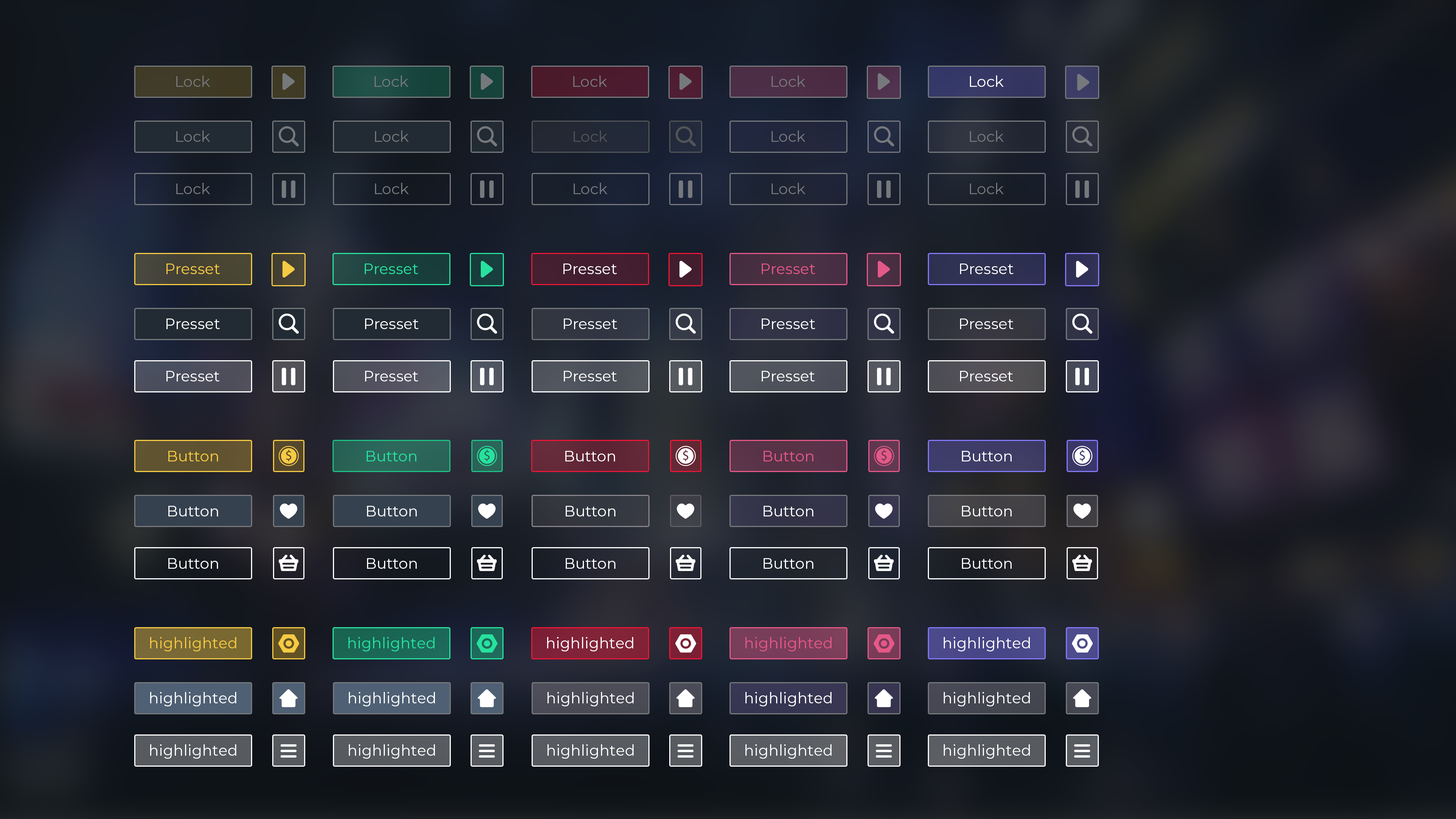
<style>
.page{position:relative;width:1456px;height:819px}
.page>*{position:absolute;margin:0}
.t1{font:15.2px "Montserrat-Regular";color:#76797c}
.t2{font:15.2px "Montserrat-Regular";color:#ffffff}
.t3{font:15.2px "Montserrat-Regular";color:#525557}
.t4{font:15.2px "Montserrat-Regular";color:#f6ca43}
.t5{font:15.2px "Montserrat-Regular";color:#27e29e}
.t6{font:15.2px "Montserrat-Regular";color:#e45887}
</style>
<div class="page">
<p class="t1" style="left:176px;top:75px;width:34px;height:12px">Lock</p>
<p class="t1" style="left:375px;top:75px;width:33px;height:12px">Lock</p>
<p class="t1" style="left:573px;top:75px;width:34px;height:12px">Lock</p>
<p class="t1" style="left:772px;top:75px;width:33px;height:12px">Lock</p>
<p class="t2" style="left:970px;top:75px;width:34px;height:12px">Lock</p>
<p class="t1" style="left:176px;top:130px;width:34px;height:12px">Lock</p>
<p class="t1" style="left:375px;top:130px;width:34px;height:12px">Lock</p>
<p class="t3" style="left:574px;top:130px;width:33px;height:12px">Lock</p>
<p class="t1" style="left:772px;top:130px;width:33px;height:12px">Lock</p>
<p class="t1" style="left:970px;top:130px;width:34px;height:12px">Lock</p>
<p class="t1" style="left:176px;top:183px;width:34px;height:11px">Lock</p>
<p class="t1" style="left:375px;top:183px;width:34px;height:11px">Lock</p>
<p class="t1" style="left:574px;top:183px;width:33px;height:11px">Lock</p>
<p class="t1" style="left:772px;top:183px;width:33px;height:11px">Lock</p>
<p class="t1" style="left:970px;top:183px;width:34px;height:11px">Lock</p>
<p class="t4" style="left:166px;top:264px;width:54px;height:10px">Presset</p>
<p class="t5" style="left:365px;top:264px;width:53px;height:10px">Presset</p>
<p class="t2" style="left:563px;top:264px;width:54px;height:10px">Presset</p>
<p class="t6" style="left:762px;top:264px;width:53px;height:10px">Presset</p>
<p class="t2" style="left:960px;top:264px;width:53px;height:10px">Presset</p>
<p class="t2" style="left:166px;top:318px;width:54px;height:11px">Presset</p>
<p class="t2" style="left:365px;top:318px;width:54px;height:11px">Presset</p>
<p class="t2" style="left:564px;top:318px;width:53px;height:11px">Presset</p>
<p class="t2" style="left:762px;top:318px;width:53px;height:11px">Presset</p>
<p class="t2" style="left:960px;top:318px;width:53px;height:11px">Presset</p>
<p class="t2" style="left:166px;top:371px;width:54px;height:10px">Presset</p>
<p class="t2" style="left:365px;top:371px;width:53px;height:10px">Presset</p>
<p class="t2" style="left:564px;top:371px;width:53px;height:10px">Presset</p>
<p class="t2" style="left:762px;top:371px;width:53px;height:10px">Presset</p>
<p class="t2" style="left:960px;top:371px;width:53px;height:10px">Presset</p>
<p class="t4" style="left:168px;top:451px;width:50px;height:10px">Button</p>
<p class="t5" style="left:367px;top:451px;width:49px;height:10px">Button</p>
<p class="t2" style="left:565px;top:451px;width:50px;height:10px">Button</p>
<p class="t6" style="left:764px;top:451px;width:49px;height:10px">Button</p>
<p class="t2" style="left:962px;top:451px;width:50px;height:10px">Button</p>
<p class="t2" style="left:168px;top:506px;width:50px;height:10px">Button</p>
<p class="t2" style="left:367px;top:506px;width:50px;height:10px">Button</p>
<p class="t2" style="left:566px;top:506px;width:49px;height:10px">Button</p>
<p class="t2" style="left:764px;top:506px;width:49px;height:10px">Button</p>
<p class="t2" style="left:962px;top:506px;width:50px;height:10px">Button</p>
<p class="t2" style="left:168px;top:558px;width:50px;height:11px">Button</p>
<p class="t2" style="left:367px;top:558px;width:50px;height:11px">Button</p>
<p class="t2" style="left:566px;top:558px;width:49px;height:11px">Button</p>
<p class="t2" style="left:764px;top:558px;width:49px;height:11px">Button</p>
<p class="t2" style="left:962px;top:558px;width:50px;height:11px">Button</p>
<p class="t4" style="left:150px;top:637px;width:86px;height:14px">highlighted</p>
<p class="t5" style="left:348px;top:637px;width:87px;height:14px">highlighted</p>
<p class="t2" style="left:547px;top:637px;width:86px;height:14px">highlighted</p>
<p class="t6" style="left:745px;top:637px;width:87px;height:14px">highlighted</p>
<p class="t2" style="left:944px;top:637px;width:86px;height:14px">highlighted</p>
<p class="t2" style="left:150px;top:692px;width:86px;height:14px">highlighted</p>
<p class="t2" style="left:349px;top:692px;width:86px;height:14px">highlighted</p>
<p class="t2" style="left:548px;top:692px;width:86px;height:14px">highlighted</p>
<p class="t2" style="left:745px;top:692px;width:87px;height:14px">highlighted</p>
<p class="t2" style="left:944px;top:692px;width:86px;height:14px">highlighted</p>
<p class="t2" style="left:150px;top:744px;width:86px;height:15px">highlighted</p>
<p class="t2" style="left:349px;top:744px;width:86px;height:15px">highlighted</p>
<p class="t2" style="left:548px;top:744px;width:86px;height:15px">highlighted</p>
<p class="t2" style="left:745px;top:744px;width:87px;height:15px">highlighted</p>
<p class="t2" style="left:944px;top:744px;width:86px;height:15px">highlighted</p>
</div>
